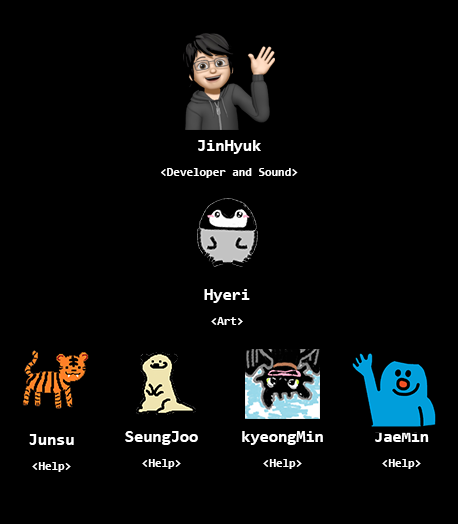
<style>
.page{position:relative;width:458px;height:524px;background:#000000}
.page>*{position:absolute;margin:0}
.t1{font:11.9px "Consolas-Bold";color:#ffffff}
.t2{font:16.7px "Consolas-Bold";color:#ffffff}
</style>
<div class="page">
<p class="t1" style="left:161px;top:140px;width:137px;height:38px;text-align:center"><span class="t2">JinHyuk<br></span>&lt;Developer and Sound&gt;</p>
<p class="t2" style="left:204px;top:289px;width:46px;height:36px;text-align:center">Hyeri<br><span class="t1">&lt;Art&gt;</span></p>
<p class="t1" style="left:29px;top:434px;width:45px;height:38px;text-align:center"><span class="t2">Junsu<br></span>&lt;Help&gt;</p>
<p class="t2" style="left:125px;top:431px;width:73px;height:38px;text-align:center">SeungJoo<br><span class="t1">&lt;Help&gt;</span></p>
<p class="t2" style="left:242px;top:431px;width:81px;height:38px;text-align:center">kyeongMin<br><span class="t1">&lt;Help&gt;</span></p>
<p class="t2" style="left:375px;top:431px;width:54px;height:38px;text-align:center">JaeMin<br><span class="t1">&lt;Help&gt;</span></p>
</div>
